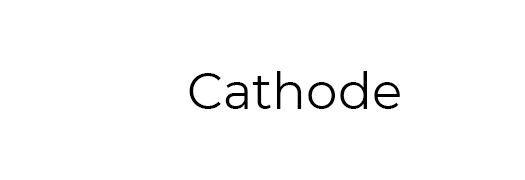
<style>
.page{position:relative;width:525px;height:180px;background:#ffffff}
.page>*{position:absolute;margin:0}
.t1{font:50px "Montserrat-Regular";color:#000000}
</style>
<div class="page">
<p class="t1" style="left:189px;top:71px;width:211px;height:38px">Cathode</p>
</div>
